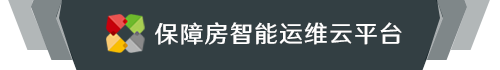
<style>
.page{position:relative;width:500px;height:70px;background:#333f43}
.page>*{position:absolute;margin:0}
.t1{font:24px "HYWenHei-FEW";letter-spacing:0.04em;color:#ffffff}
</style>
<div class="page">
<p class="t1" style="left:155px;top:22px;width:247px;height:23px">保障房智能运维云平台</p>
</div>
